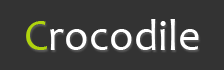
<style>
.page{position:relative;width:224px;height:70px;background:#333333}
.page>*{position:absolute;margin:0}
.t1{font:44.4px "Candara";color:#ffffff}
.t2{font:44.4px "Candara";color:#b0d40e}
</style>
<div class="page">
<p class="t1" style="left:26px;top:19px;width:173px;height:31px"><span class="t2">C</span>rocodile</p>
</div>
